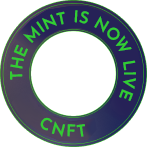
<style>
.page{position:relative;width:147px;height:147px;background:#ffffff}
.page>*{position:absolute;margin:0}
.t1{font:16px "JosefinSansRoman-Medium";letter-spacing:0.075em;color:#32cd32}
</style>
<div class="page">
<p class="t1" style="left:10px;top:10px;width:126px;height:91px;rotate:11deg">THE MINT IS NOW LIVE</p>
<p class="t1" style="left:40px;top:117px;width:45px;height:20px;rotate:11deg">CNFT</p>
</div>
